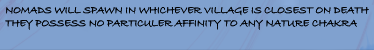
<style>
.page{position:relative;width:374px;height:50px;background:#80a1cf}
.page>*{position:absolute;margin:0}
.t1{font:10.7px "BradleyHandITC";color:#000000;text-transform:uppercase}
</style>
<div class="page">
<p class="t1" style="left:5px;top:6px;width:364px;height:24px">Nomads will spawn in whichever village is closest on death<br>they possess no particuler affinity to any nature chakra</p>
<p class="t1" style="left:5px;top:6px;width:364px;height:24px">Nomads will spawn in whichever village is closest on death<br>they possess no particuler affinity to any nature chakra</p>
</div>
